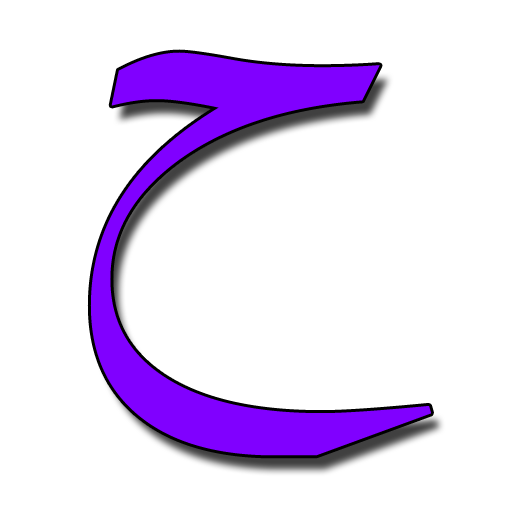
<style>
.page{position:relative;width:512px;height:512px;background:#ffffff}
.page>*{position:absolute;margin:0}
.t1{font:700px "TraditionalArabic";color:#8000ff}
</style>
<div class="page">
<p class="t1" style="left:90px;top:52px;width:341px;height:404px">ح</p>
</div>
